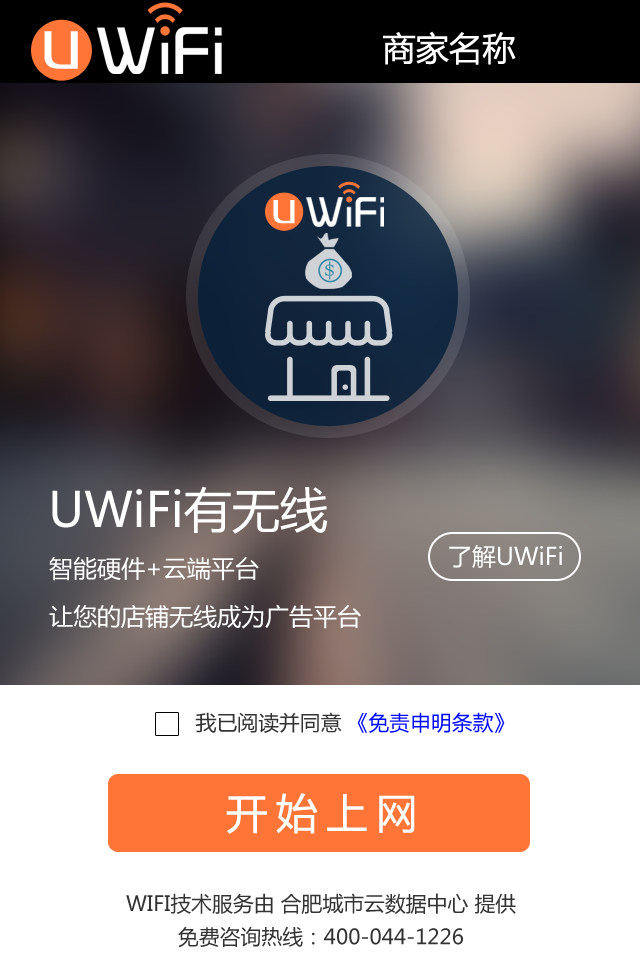
<style>
.page{position:relative;width:640px;height:960px;background:#ffffff}
.page>*{position:absolute;margin:0}
.t1{font:62.5px "FZZZHUNHJW--GB1-0";letter-spacing:0.05em;color:#ffffff}
.t2{font:33.3px "MicrosoftYaHei";color:#ffffff}
.t3{font:48px "MicrosoftYaHei";color:#ffffff}
.t4{font:24px "MicrosoftYaHei";color:#fefefe}
.t5{font:24px/48px "MicrosoftYaHei";color:#ffffff}
.t6{font:20.8px "MicrosoftYaHei";color:#0009ff}
.t7{font:20.8px "MicrosoftYaHei";color:#333333}
.t8{font:41.7px "MicrosoftYaHei";letter-spacing:0.2em;color:#ffffff}
.t9{font:20.8px/33.3px "MicrosoftYaHei";color:#333333}
</style>
<div class="page">
<p class="t1" style="left:44px;top:31px;width:34px;height:38px">u</p>
<p class="t2" style="left:383px;top:31px;width:133px;height:34px">商家名称</p>
<p class="t3" style="left:52px;top:486px;width:276px;height:48px">UWiFi有无线</p>
<p class="t4" style="left:449px;top:545px;width:113px;height:23px">了解UWiFi</p>
<p class="t5" style="left:49px;top:556px;width:312px;height:73px">智能硬件+云端平台<br>让您的店铺无线成为广告平台</p>
<p class="t6" style="left:195px;top:712px;width:310px;height:21px"><span class="t7">我已阅读并同意 </span>《免责申明条款》</p>
<p class="t8" style="left:226px;top:793px;width:189px;height:41px">开始上网</p>
<p class="t9" style="left:126px;top:893px;width:390px;height:55px;text-align:center">WIFI技术服务由 合肥城市云数据中心 提供<br>免费咨询热线：400-044-1226</p>
</div>
